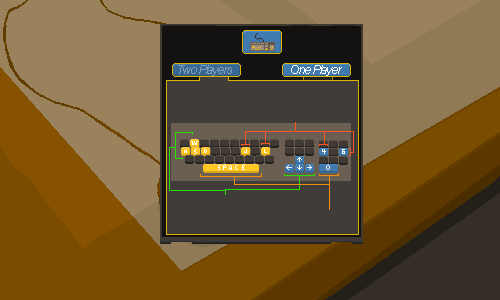
<style>
.page{position:relative;width:500px;height:300px;background:#99825c}
.page>*{position:absolute;margin:0}
.t1{font:12px "Arial-ItalicMT";letter-spacing:-0.085em;color:#829eb6}
.t2{font:12px "Arial-ItalicMT";letter-spacing:-0.085em;color:#ffffff}
</style>
<div class="page">
<p class="t1" style="left:178px;top:65px;width:54px;height:11px">Two Players</p>
<p class="t2" style="left:291px;top:65px;width:51px;height:11px">One Player</p>
</div>
